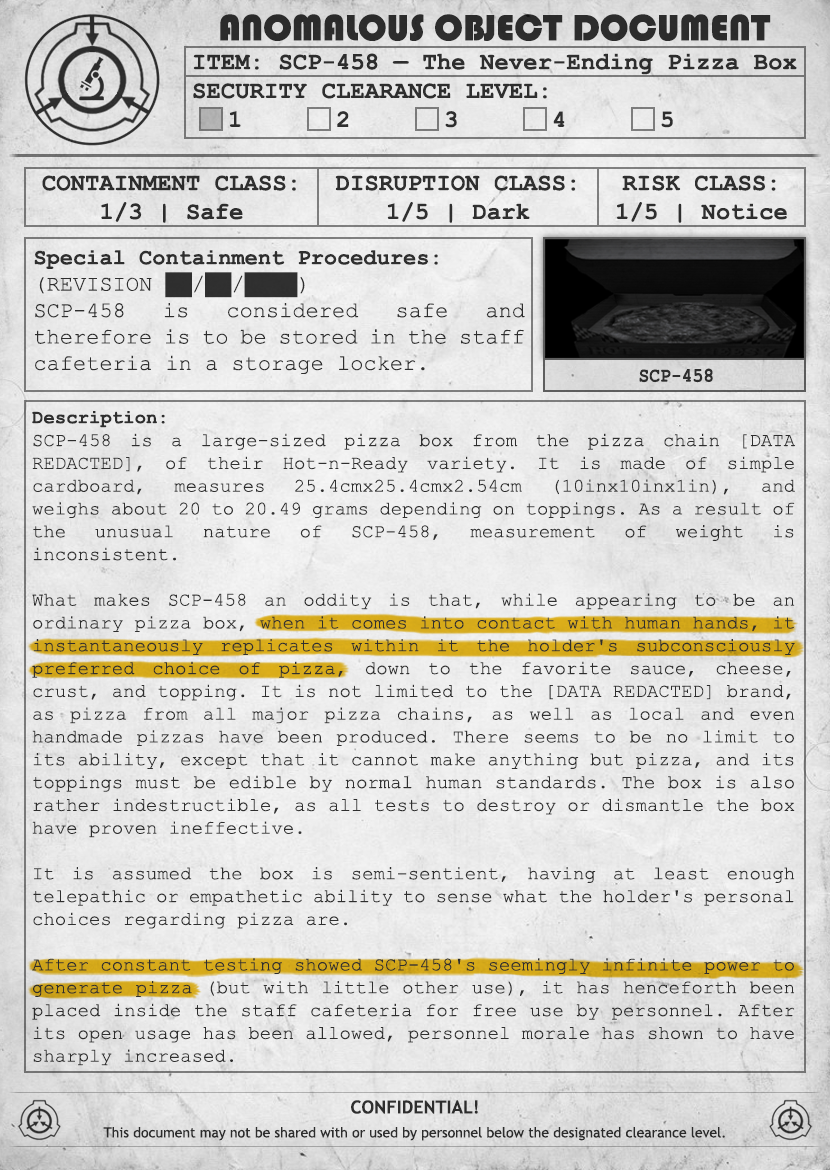
<style>
.page{position:relative;width:830px;height:1170px}
.page>*{position:absolute;margin:0}
.t1{font:38px "Bauhaus93";color:#333333;text-transform:uppercase}
.t2{font:24px "CourierNewPS-BoldMT";color:#333333}
.t3{font:24px "CourierNewPS-BoldMT";color:#333333;text-transform:uppercase}
.t4{font:22px "CourierNewPSMT";color:#333333}
.t5{font:22px "CourierNewPS-BoldMT";color:#333333}
.t6{font:20.1px "CourierNewPS-BoldMT";color:#333333;scale:0.9 1}
.t7{font:19px "CourierNewPSMT";color:#333333}
.t8{font:19px "CourierNewPS-BoldMT";color:#333333}
.t9{font:14px/24px "TrebuchetMS";color:#333333}
.t10{font:18px/24px "TrebuchetMS-Bold";color:#333333}
</style>
<div class="page">
<p class="t1" style="left:220px;top:14px;width:551px;height:27px">anomalous object document</p>
<p class="t2" style="left:193px;top:53px;width:604px;height:75px">ITEM: SCP-458 — The Never-Ending Pizza Box<br><span class="t3">Security CLEARANCE LEVEL:</span> <br> 1   2   3   4   5</p>
<p class="t2" style="left:42px;top:175px;width:254px;height:48px;text-align:center">CONTAINMENT CLASS:<br>1/3 | Safe</p>
<p class="t2" style="left:335px;top:175px;width:241px;height:48px;text-align:center">DISRUPTION CLASS:<br>1/5 | Dark</p>
<p class="t2" style="left:617px;top:175px;width:170px;height:48px;text-align:center">RISK CLASS:<br>1/5 | Notice</p>
<p class="t4" style="left:34px;top:250px;width:491px;height:124px;text-align:justify"><span class="t5">Special Containment Procedures:<br></span>(REVISION ██/██/████) <br>SCP-458 is considered safe and therefore is to be stored in the staff cafeteria in a storage locker.</p>
<p class="t6" style="left:639px;top:368px;width:74px;height:15px">SCP-458</p>
<p class="t7" style="left:32px;top:411px;width:763px;height:655px;text-align:justify"><span class="t8">Description:<br></span>SCP-458 is a large-sized pizza box from the pizza chain [DATA REDACTED], of their Hot-n-Ready variety. It is made of simple cardboard, measures 25.4cmx25.4cmx2.54cm (10inx10inx1in), and weighs about 20 to 20.49 grams depending on toppings. As a result of the unusual nature of SCP-458, measurement of weight is inconsistent.<br><br>What makes SCP-458 an oddity is that, while appearing to be an ordinary pizza box, when it comes into contact with human hands, it instantaneously replicates within it the holder's subconsciously preferred choice of pizza, down to the favorite sauce, cheese, crust, and topping. It is not limited to the [DATA REDACTED] brand, as pizza from all major pizza chains, as well as local and even handmade pizzas have been produced. There seems to be no limit to its ability, except that it cannot make anything but pizza, and its toppings must be edible by normal human standards. The box is also rather indestructible, as all tests to destroy or dismantle the box have proven ineffective.<br><br>It is assumed the box is semi-sentient, having at least enough telepathic or empathetic ability to sense what the holder's personal choices regarding pizza are.<br><br>After constant testing showed SCP-458's seemingly infinite power to generate pizza (but with little other use), it has henceforth been placed inside the staff cafeteria for free use by personnel. After its open usage has been allowed, personnel morale has shown to have sharply increased.</p>
<p class="t9" style="left:103px;top:1100px;width:622px;height:41px;text-align:center"><span class="t10">CONFIDENTIAL!<br></span>This document may not be shared with or used by personnel below the designated clearance level.</p>
</div>
